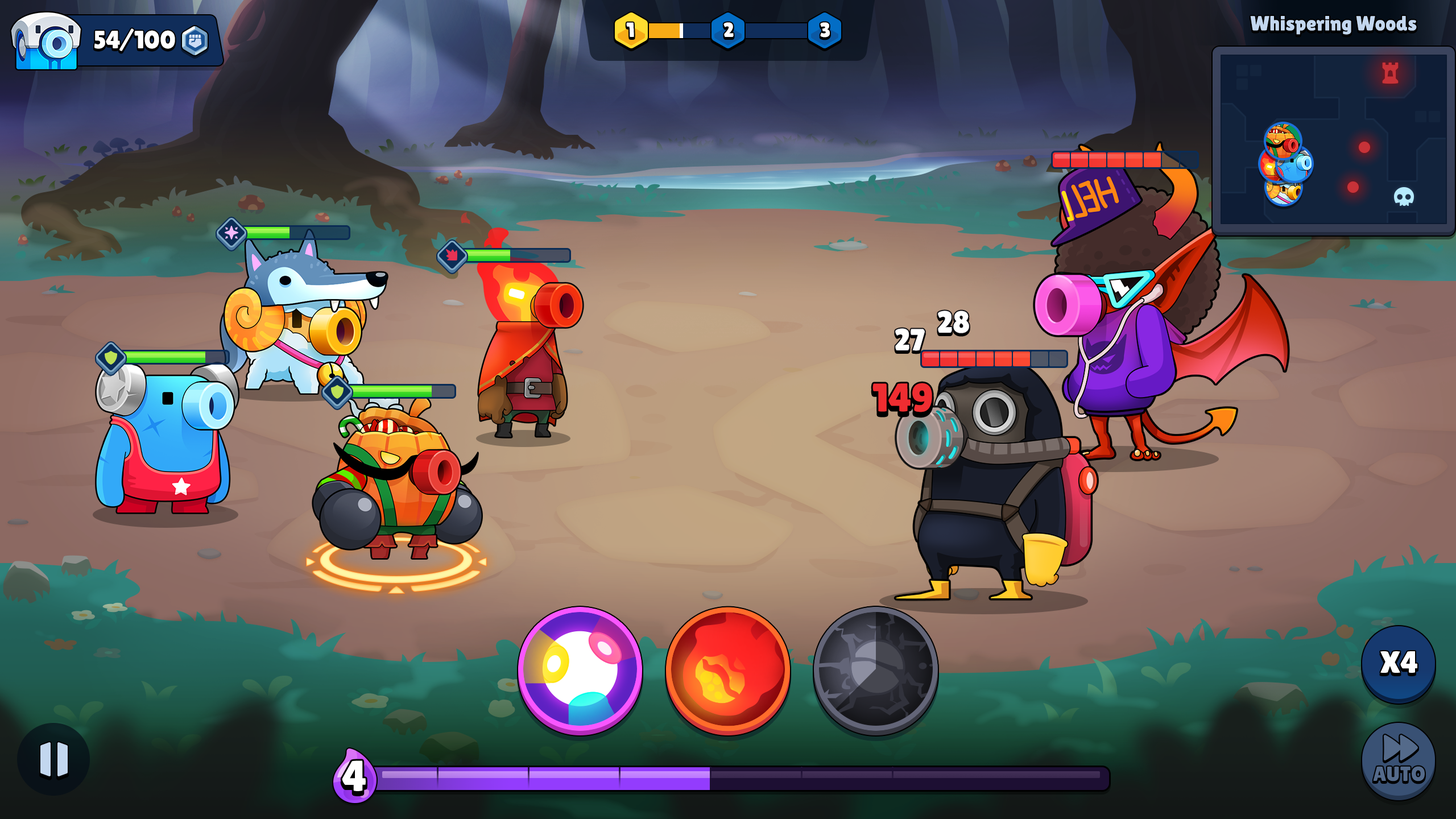
<style>
.page{position:relative;width:1456px;height:819px}
.page>*{position:absolute;margin:0}
.t1{font:20.5px "LilitaOne";color:#c3d7ef}
.t2{font:25px "LilitaOne";color:#ffffff}
.t3{font:20.5px "LilitaOne";color:#ffffff}
.t4{font:30.7px "LilitaOne";color:#ffffff}
.t5{font:39.8px "LilitaOne";color:#ef2d31}
.t6{font:30.7px "LilitaOne";color:#ffffff;text-transform:uppercase}
.t7{font:43.2px "LilitaOne";letter-spacing:0.02em;color:#ffffff}
.t8{font:20.5px "LilitaOne";color:#546a8a}
</style>
<div class="page">
<p class="t1" style="left:1250px;top:16px;width:167px;height:19px">Whispering Woods</p>
<p class="t2" style="left:94px;top:28px;width:81px;height:23px">54/100</p>
<p class="t3" style="left:626px;top:22px;width:8px;height:15px">1</p>
<p class="t3" style="left:723px;top:22px;width:11px;height:15px">2</p>
<p class="t3" style="left:820px;top:22px;width:10px;height:16px">3</p>
<p class="t4" style="left:938px;top:311px;width:31px;height:22px">28</p>
<p class="t4" style="left:895px;top:328px;width:30px;height:23px">27</p>
<p class="t5" style="left:872px;top:383px;width:60px;height:29px">149</p>
<p class="t6" style="left:1380px;top:651px;width:37px;height:22px">x4</p>
<p class="t7" style="left:342px;top:760px;width:24px;height:31px">4</p>
<p class="t8" style="left:1373px;top:766px;width:52px;height:15px">AUTO</p>
</div>
